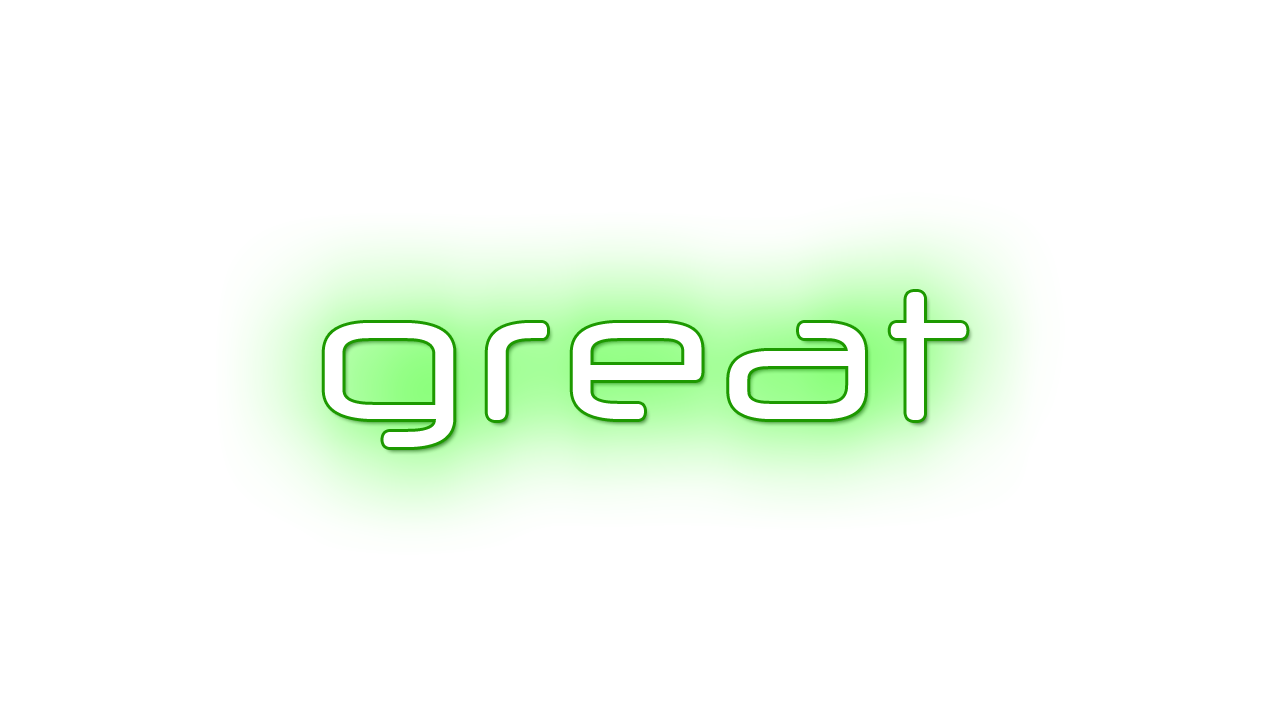
<style>
.page{position:relative;width:1280px;height:720px;background:#ffffff}
.page>*{position:absolute;margin:0}
.t1{font:180px "NeuropolXFree";color:#ffffff}
</style>
<div class="page">
<p class="t1" style="left:324px;top:292px;width:643px;height:155px">great</p>
</div>
